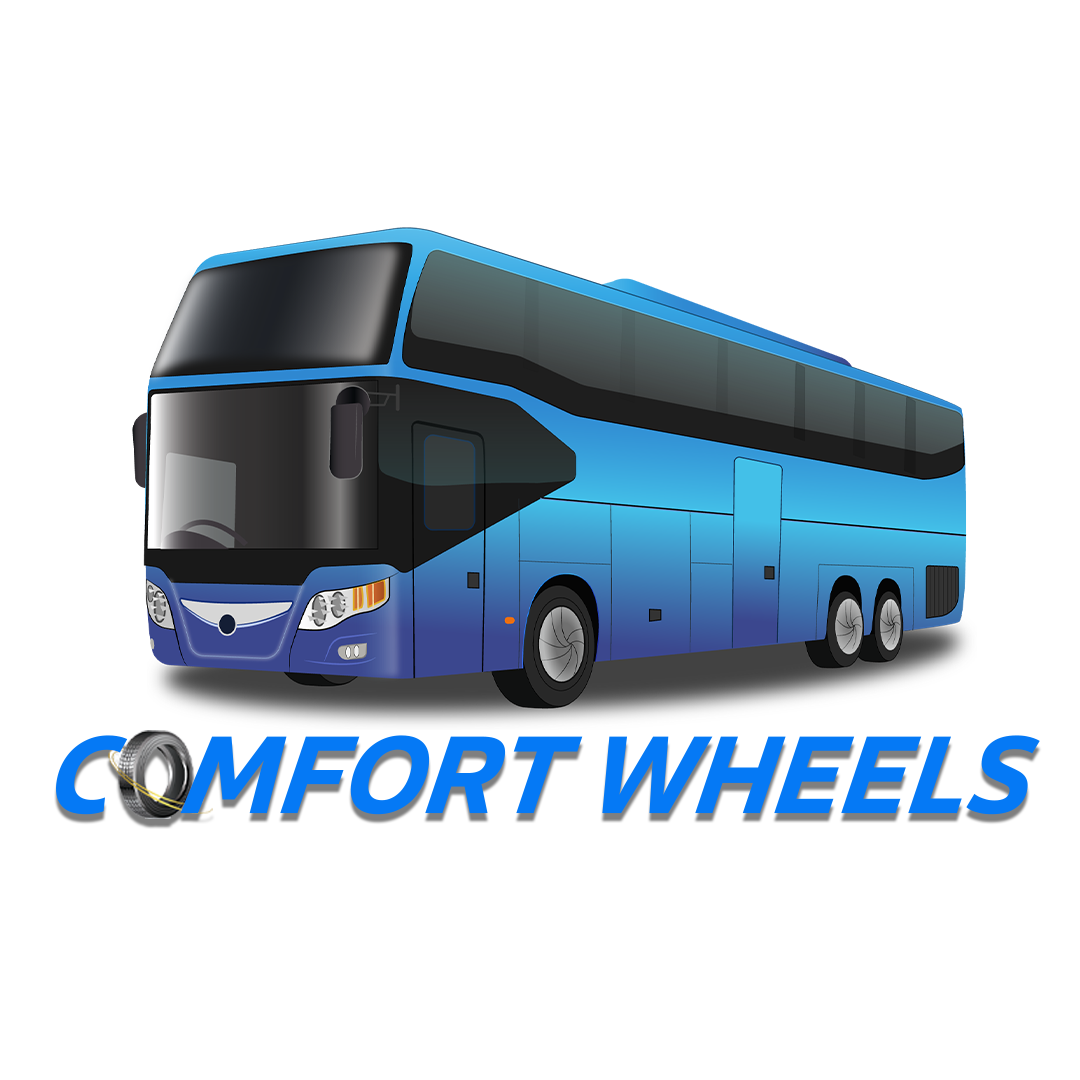
<style>
.page{position:relative;width:1080px;height:1080px;background:#ffffff}
.page>*{position:absolute;margin:0}
.t1{font:107.5px "RionaSansW04-BoldItalic";color:#0579f5;font-style:italic}
</style>
<div class="page">
<p class="t1" style="left:56px;top:735px;width:984px;height:80px">C   MFORT WHEELS</p>
</div>
